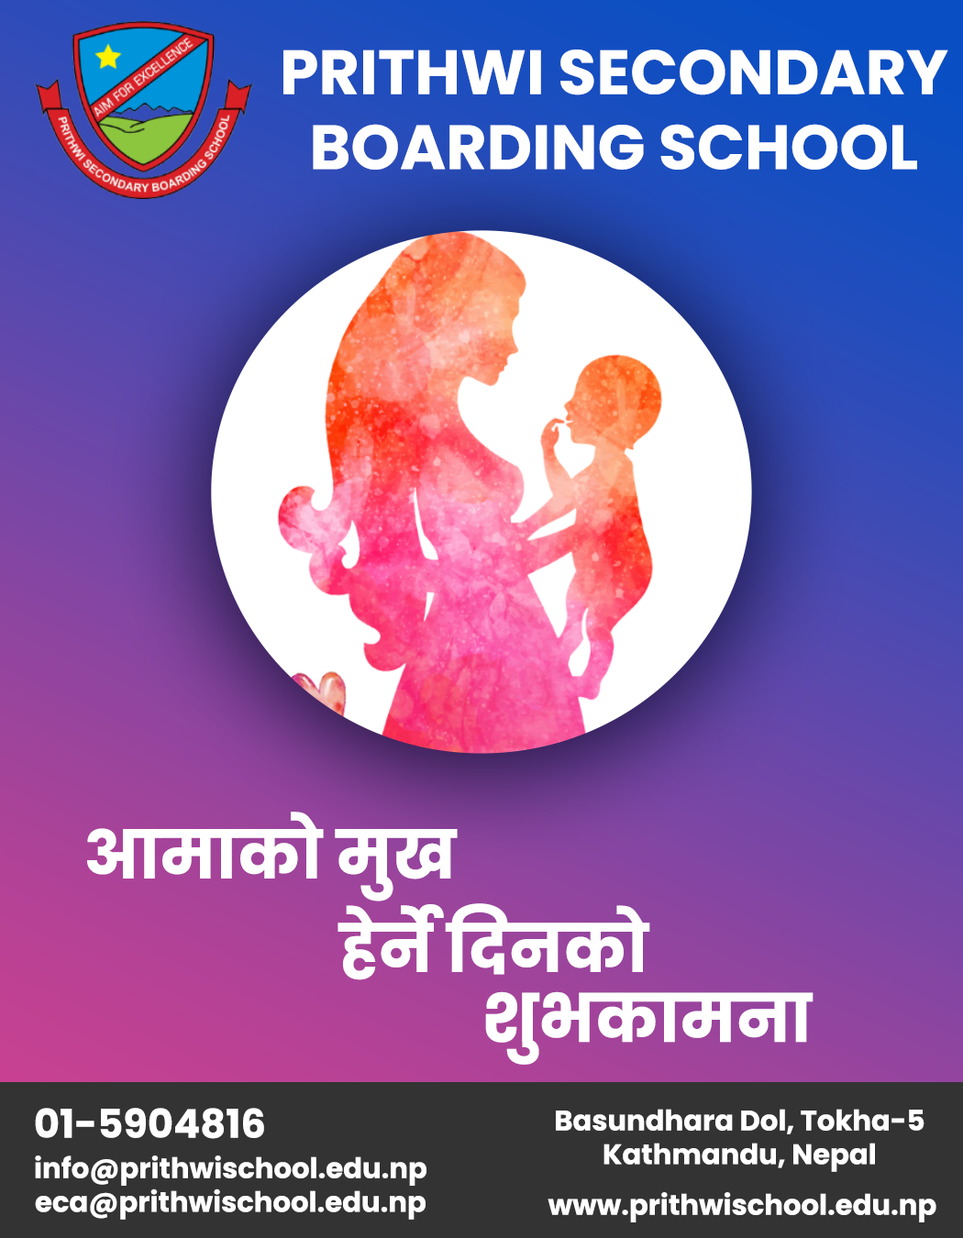
<style>
.page{position:relative;width:963px;height:1238px}
.page>*{position:absolute;margin:0}
.t1{font:62.5px "Poppins-Bold";color:#ffffff}
.t2{font:66.3px "Poppins-Bold";color:#ffffff}
.t3{font:39.6px "Poppins-Bold";color:#ffffff}
.t4{font:28.1px "Poppins-Bold";color:#ffffff}
</style>
<div class="page">
<p class="t1" style="left:283px;top:50px;width:665px;height:120px;text-align:center">PRITHWI SECONDARY<br>BOARDING SCHOOL</p>
<p class="t2" style="left:87px;top:812px;width:371px;height:90px">आमाको मुख</p>
<p class="t2" style="left:338px;top:903px;width:312px;height:77px">हेनेर्े िदनको</p>
<p class="t2" style="left:485px;top:991px;width:329px;height:74px">शुभकामना</p>
<p class="t3" style="left:35px;top:1108px;width:229px;height:31px">01-5904816</p>
<p class="t4" style="left:556px;top:1109px;width:369px;height:63px;text-align:center">Basundhara Dol, Tokha-5<br>Kathmandu, Nepal</p>
<p class="t4" style="left:35px;top:1156px;width:391px;height:64px;text-align:center">info@prithwischool.edu.np<br>eca@prithwischool.edu.np</p>
<p class="t4" style="left:548px;top:1192px;width:388px;height:31px">www.prithwischool.edu.np</p>
</div>
